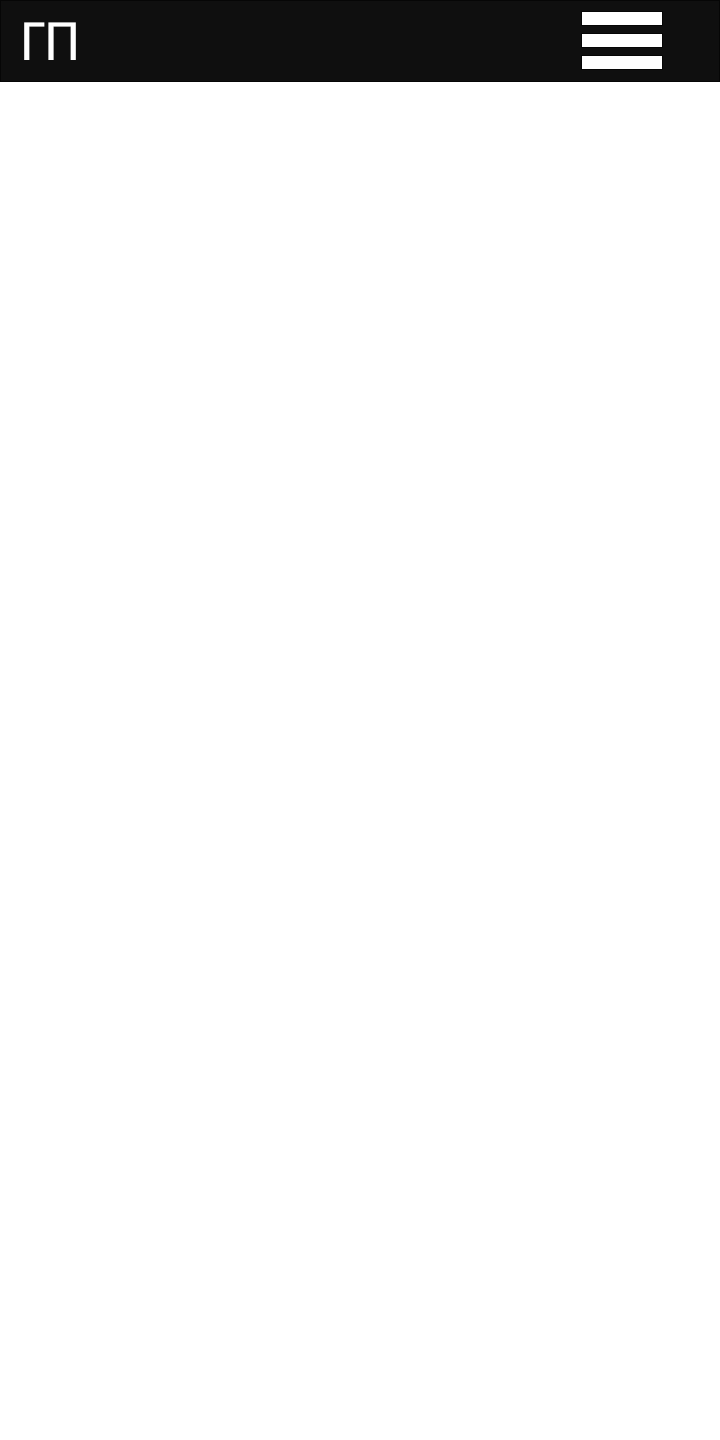
<style>
.page{position:relative;width:720px;height:1440px;background:#ffffff}
.page>*{position:absolute;margin:0}
.t1{font:55.7px "MyriadPro-Regular";color:#ffffff}
</style>
<div class="page">
<p class="t1" style="left:24px;top:22px;width:52px;height:38px">ГП</p>
</div>
